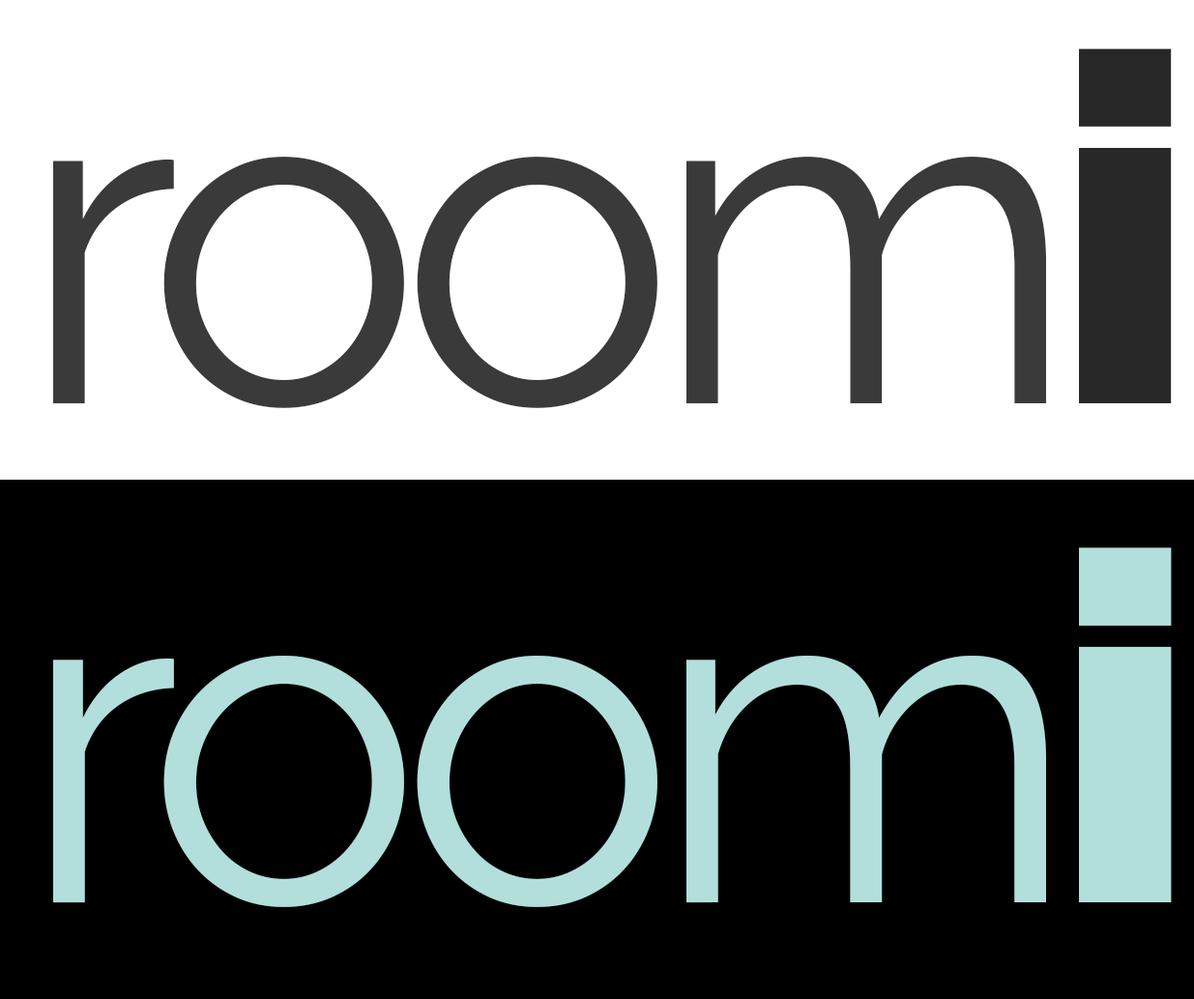
<style>
.page{position:relative;width:1194px;height:999px;background:#000000}
.page>*{position:absolute;margin:0}
.t1{font:465px "Raleway-Regular";letter-spacing:-0.05em;color:#3a3a3a}
.t2{font:485.6px "Raleway-Black";color:#282828}
.t3{font:465px "Raleway-Regular";letter-spacing:-0.05em;color:#b2dfdb}
.t4{font:485.6px "Raleway-Black";color:#b2dfdb}
</style>
<div class="page">
<p class="t1" style="left:53px;top:48px;width:1119px;height:360px">room<span class="t2">i</span></p>
<p class="t3" style="left:53px;top:547px;width:1119px;height:360px">room<span class="t4">i</span></p>
</div>
